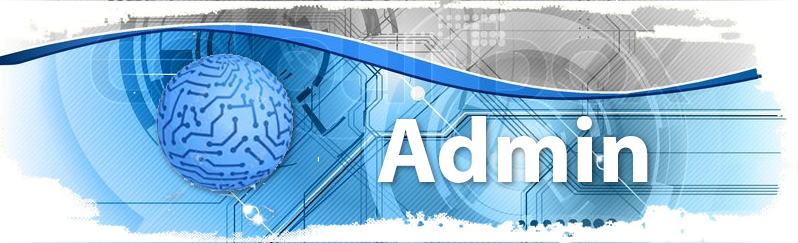
<style>
.page{position:relative;width:798px;height:243px}
.page>*{position:absolute;margin:0}
.t1{font:93.7px "MyriadPro-Bold";color:#ffffff}
</style>
<div class="page">
<p class="t1" style="left:377px;top:116px;width:271px;height:67px">Admin</p>
</div>
